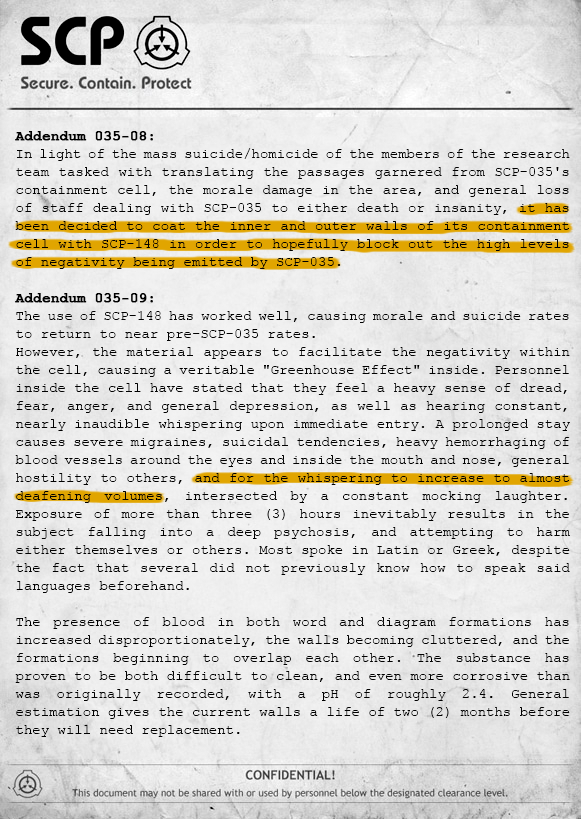
<style>
.page{position:relative;width:581px;height:819px}
.page>*{position:absolute;margin:0}
.t1{font:14px/18px "CourierNewPSMT";color:#000000}
.t2{font:14px/18px "CourierNewPS-BoldMT";color:#000000;font-weight:bold}
</style>
<div class="page">
<p class="t1" style="left:15px;top:131px;width:555px;height:606px;text-align:justify"><span class="t2">Addendum 035-08: <br></span>In light of the mass suicide/homicide of the members of the research team tasked with translating the passages garnered from SCP-035's containment cell, the morale damage in the area, and general loss of staff dealing with SCP-035 to either death or insanity, it has been decided to coat the inner and outer walls of its containment cell with SCP-148 in order to hopefully block out the high levels of negativity being emitted by SCP-035.<br><br><span class="t2">Addendum 035-09: <br></span>The use of SCP-148 has worked well, causing morale and suicide rates to return to near pre-SCP-035 rates.<br>However, the material appears to facilitate the negativity within the cell, causing a veritable "Greenhouse Effect" inside. Personnel inside the cell have stated that they feel a heavy sense of dread, fear, anger, and general depression, as well as hearing constant, nearly inaudible whispering upon immediate entry. A prolonged stay causes severe migraines, suicidal tendencies, heavy hemorrhaging of blood vessels around the eyes and inside the mouth and nose, general hostility to others, and for the whispering to increase to almost deafening volumes, intersected by a constant mocking laughter. Exposure of more than three (3) hours inevitably results in the subject falling into a deep psychosis, and attempting to harm either themselves or others. Most spoke in Latin or Greek, despite the fact that several did not previously know how to speak said languages beforehand.<br><br>The presence of blood in both word and diagram formations has increased disproportionately, the walls becoming cluttered, and the formations beginning to overlap each other. The substance has proven to be both difficult to clean, and even more corrosive than was originally recorded, with a pH of roughly 2.4. General estimation gives the current walls a life of two (2) months before they will need replacement.</p>
</div>
